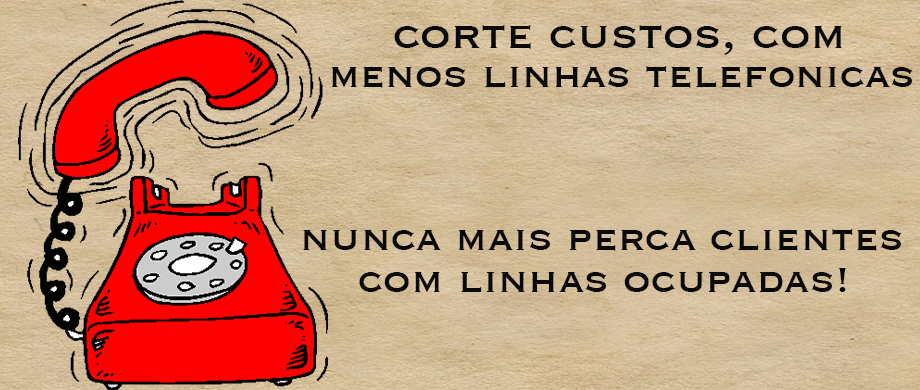
<style>
.page{position:relative;width:920px;height:390px}
.page>*{position:absolute;margin:0}
.t1{font:49.6px "Copperplate";color:#090909}
.t2{font:44.8px "Copperplate";color:#090909}
</style>
<div class="page">
<p class="t1" style="left:394px;top:25px;width:448px;height:30px">corte custos, com</p>
<p class="t2" style="left:332px;top:66px;width:581px;height:22px">menos linhas telefonicas</p>
<p class="t2" style="left:303px;top:229px;width:599px;height:22px">nunca mais perca clientes</p>
<p class="t2" style="left:359px;top:268px;width:488px;height:24px">com linhas ocupadas!</p>
</div>
